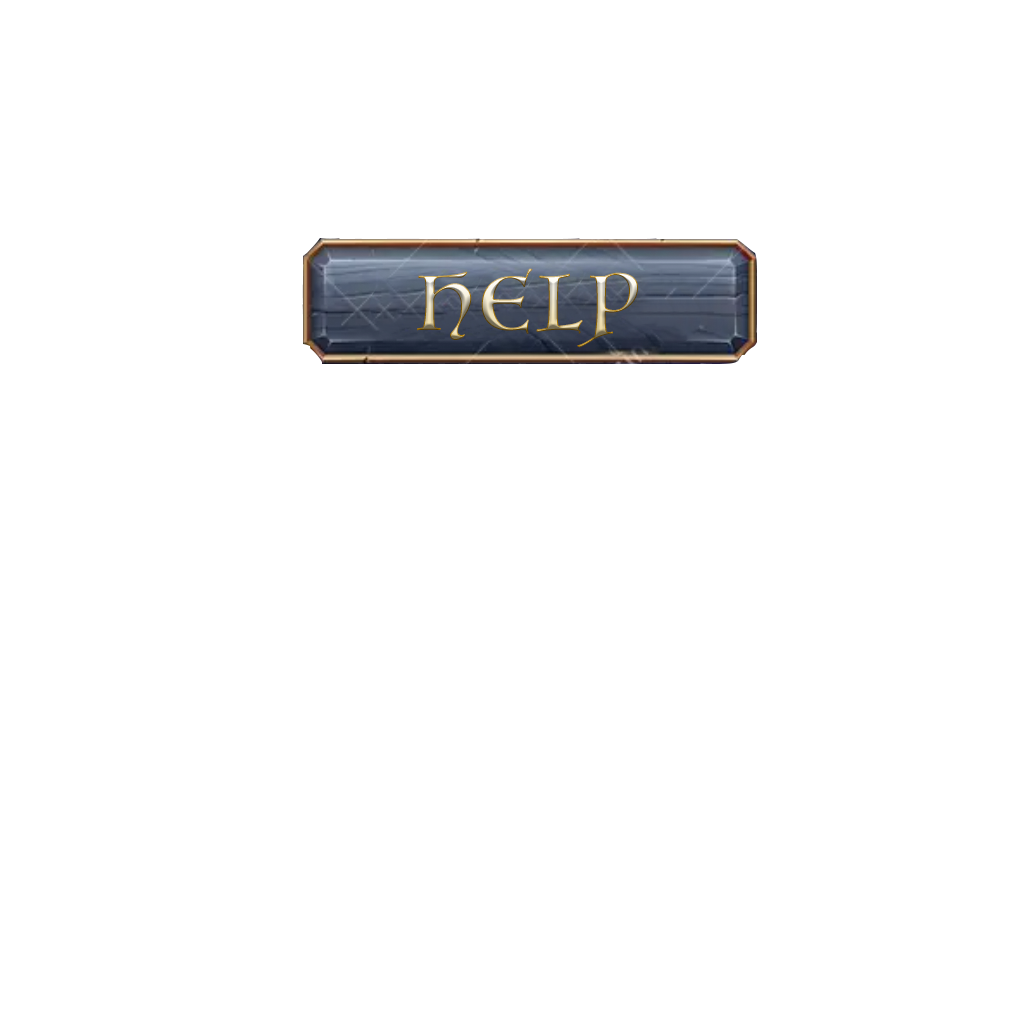
<style>
.page{position:relative;width:1024px;height:1024px;background:#ffffff}
.page>*{position:absolute;margin:0}
.t1{font:75px "Luminari-Regular";letter-spacing:0.1em}
</style>
<div class="page">
<p class="t1" style="left:417px;top:268px;width:221px;height:80px">HELP</p>
</div>
